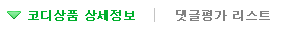
<style>
.page{position:relative;width:293px;height:30px;background:#ffffff}
.page>*{position:absolute;margin:0}
.t1{font:12px "Dotum";color:#00af2d;font-weight:bold}
.t2{font:12px "Dotum";color:#818181;font-weight:bold}
</style>
<div class="page">
<p class="t1" style="left:28px;top:10px;width:107px;height:11px">코디상품 상세정보</p>
<p class="t2" style="left:176px;top:10px;width:94px;height:11px">댓글평가 리스트</p>
</div>
